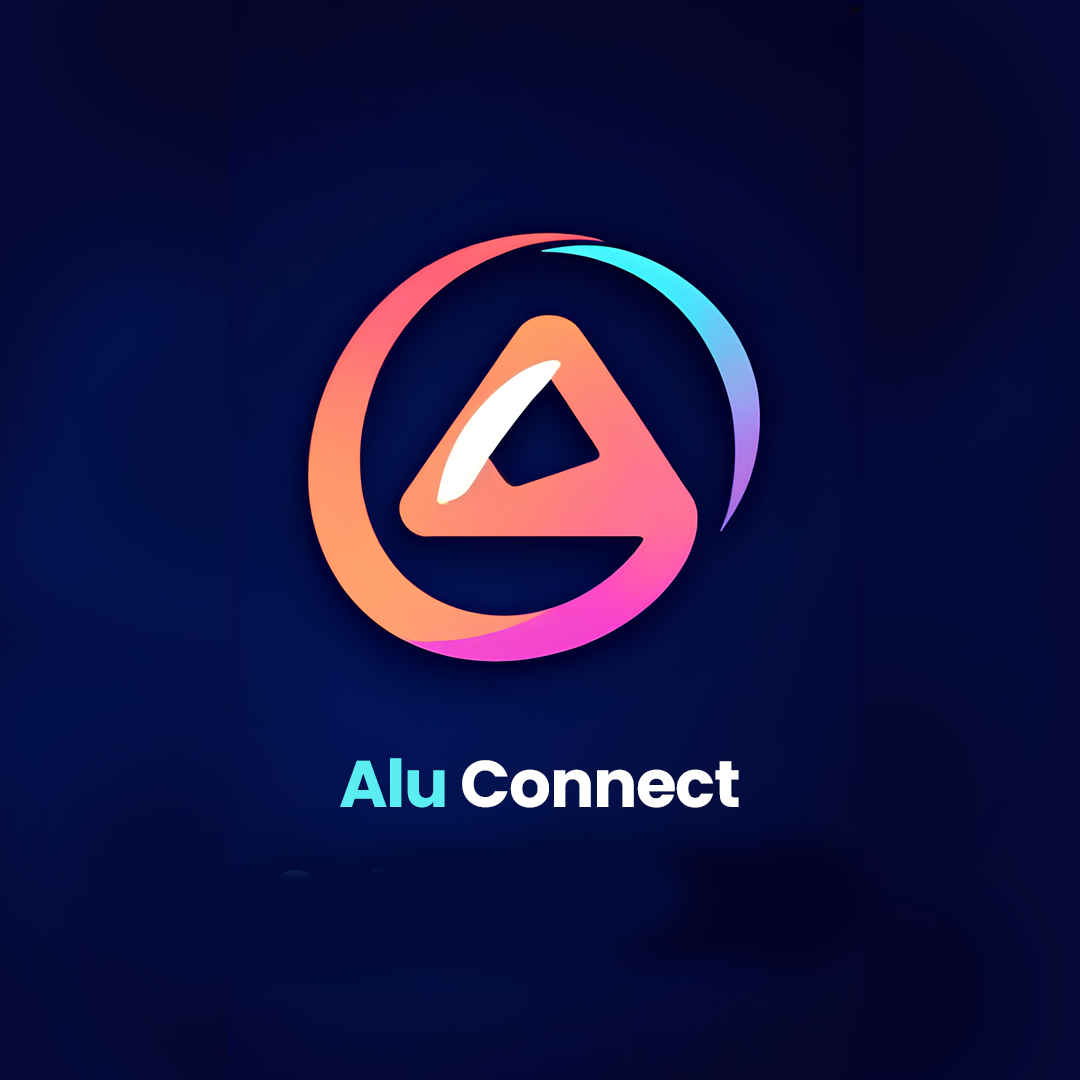
<style>
.page{position:relative;width:1080px;height:1080px}
.page>*{position:absolute;margin:0}
.t1{font:66px "Poppins-Bold";letter-spacing:-0.02em;color:#ffffff}
.t2{font:66px "Poppins-Bold";letter-spacing:-0.02em;color:#5aedf2}
</style>
<div class="page">
<p class="t1" style="left:340px;top:758px;width:399px;height:50px"><span class="t2">Alu </span>Connect</p>
</div>
